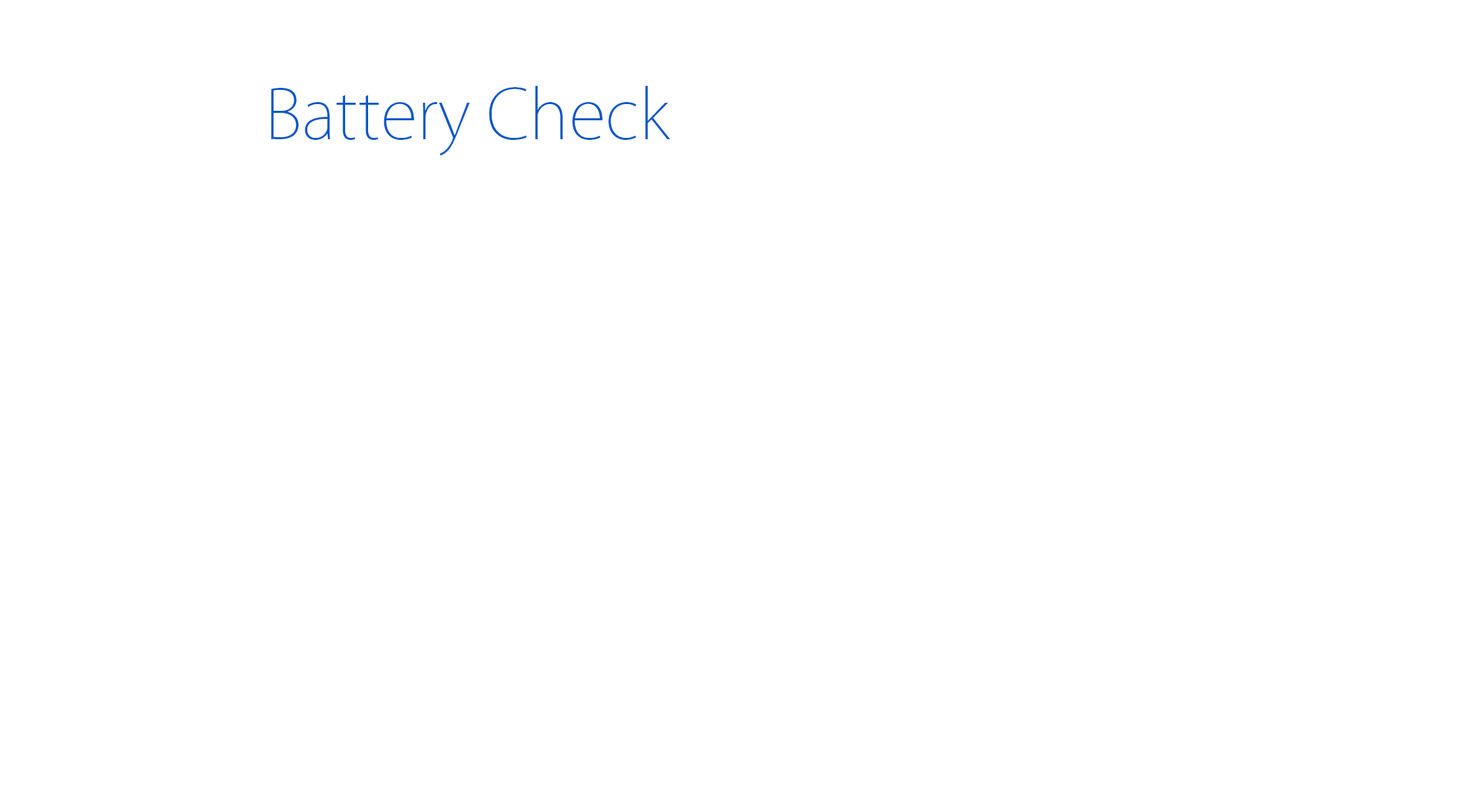
<style>
.page{position:relative;width:1471px;height:811px;background:#ffffff}
.page>*{position:absolute;margin:0}
.t1{font:67.5px "KozGoPr6N-ExtraLight";color:#0055c9}
</style>
<div class="page">
<p class="t1" style="left:271px;top:86px;width:400px;height:70px">Battery Check</p>
</div>
